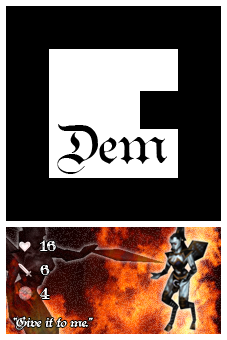
<style>
.page{position:relative;width:227px;height:340px;background:#000000}
.page>*{position:absolute;margin:0}
.t1{font:51.4px "TeutonicNo1-DemiBold";color:#000000}
.t2{font:16px/24px "TeutonicNo4-DemiBold";color:#fefefe}
.t3{font:12px "TeutonicNo2-DemiBold";color:#ffffff;font-style:italic}
</style>
<div class="page">
<p class="t1" style="left:57px;top:124px;width:110px;height:50px">Dem</p>
<p class="t2" style="left:40px;top:240px;width:16px;height:59px">16<br>6<br>4</p>
<p class="t3" style="left:13px;top:316px;width:80px;height:14px">“Give it to me.”</p>
</div>
